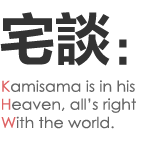
<style>
.page{position:relative;width:150px;height:149px;background:#ffffff}
.page>*{position:absolute;margin:0}
.t1{font:55px "MicrosoftYaHei-Bold";color:#333333}
.t2{font:55px "Cambria-Bold";color:#333333}
.t3{font:15px "CenturyGothic";color:#666666;scale:1.05 1}
.t4{font:15px "CenturyGothic";color:#de6263;scale:1.05 1}
</style>
<div class="page">
<p class="t1" style="left:0px;top:12px;width:110px;height:54px">宅談</p>
<p class="t2" style="left:119px;top:39px;width:8px;height:26px">:</p>
<p class="t3" style="left:2px;top:80px;width:133px;height:12px"><span class="t4">K</span>amisama is in his</p>
<p class="t3" style="left:2px;top:98px;width:134px;height:15px"><span class="t4">H</span>eaven, all’s right</p>
<p class="t3" style="left:1px;top:116px;width:113px;height:13px"><span class="t4">W</span>ith the world.</p>
</div>
